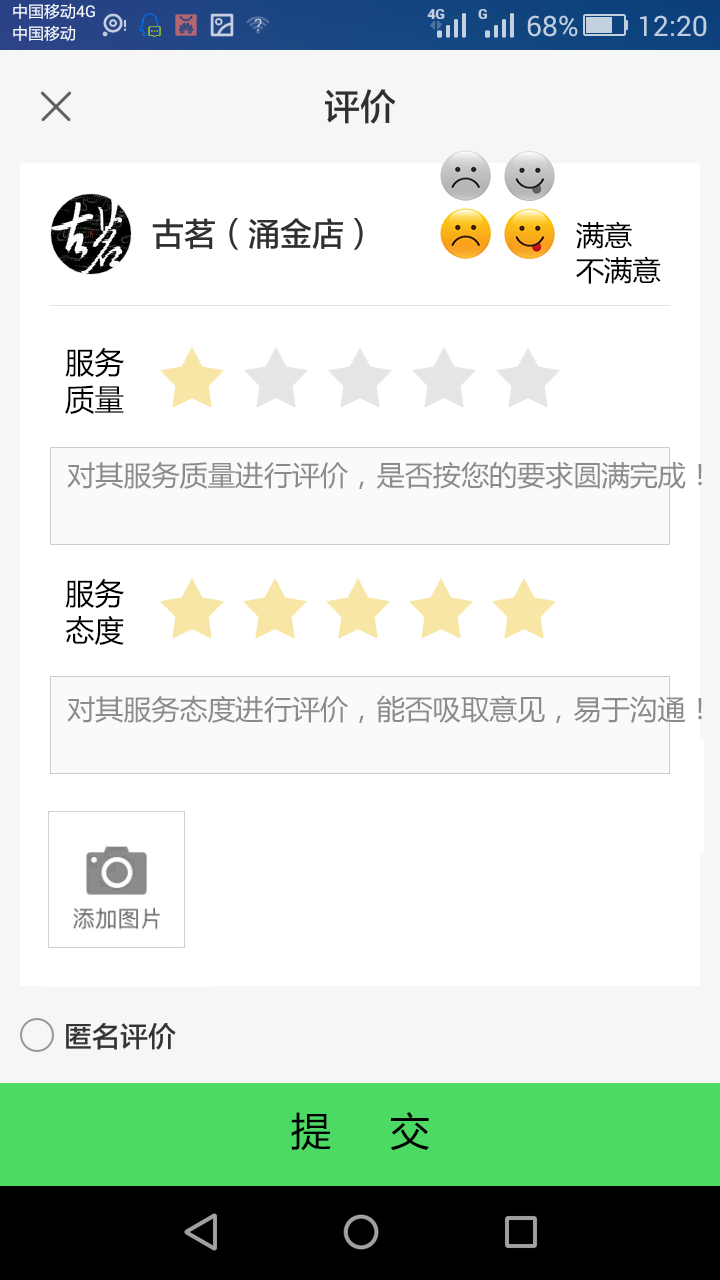
<style>
.page{position:relative;width:720px;height:1280px;background:#ffffff}
.page>*{position:absolute;margin:0}
.t1{font:27.9px/35.2px "MicrosoftYaHei";color:#000400}
.t2{font:29.9px/37.7px "MicrosoftYaHei";color:#000000}
.t3{font:27.9px "MicrosoftYaHei";color:#8c8a8c}
.t4{font:39.5px "MicrosoftYaHei";color:#000000}
</style>
<div class="page">
<p class="t1" style="left:576px;top:221px;width:85px;height:63px">满意<br>不满意</p>
<p class="t2" style="left:65px;top:347px;width:59px;height:67px">服务<br>质量</p>
<p class="t3" style="left:67px;top:461px;width:635px;height:28px">对其服务质量进行评价，是否按您的要求圆满完成！</p>
<p class="t2" style="left:65px;top:578px;width:59px;height:67px">服务<br>态度</p>
<p class="t3" style="left:67px;top:695px;width:635px;height:28px">对其服务态度进行评价，能否吸取意见，易于沟通！</p>
<p class="t4" style="left:291px;top:1112px;width:138px;height:39px">提     交</p>
</div>
